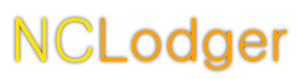
<style>
.page{position:relative;width:300px;height:79px;background:#ffffff}
.page>*{position:absolute;margin:0}
.t1{font:60px "Dotum";color:#ffa200}
.t2{font:60px "Dotum";color:#ffe400}
</style>
<div class="page">
<p class="t1" style="left:15px;top:18px;width:272px;height:52px"><span class="t2">NC</span>Lodger</p>
</div>
